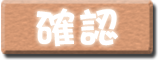
<style>
.page{position:relative;width:159px;height:61px}
.page>*{position:absolute;margin:0}
.t1{font:41.7px "DFHaiBao-W9-WINP-BF";letter-spacing:0.05em;color:#ffffff}
</style>
<div class="page">
<p class="t1" style="left:36px;top:8px;width:82px;height:39px">確認</p>
</div>
